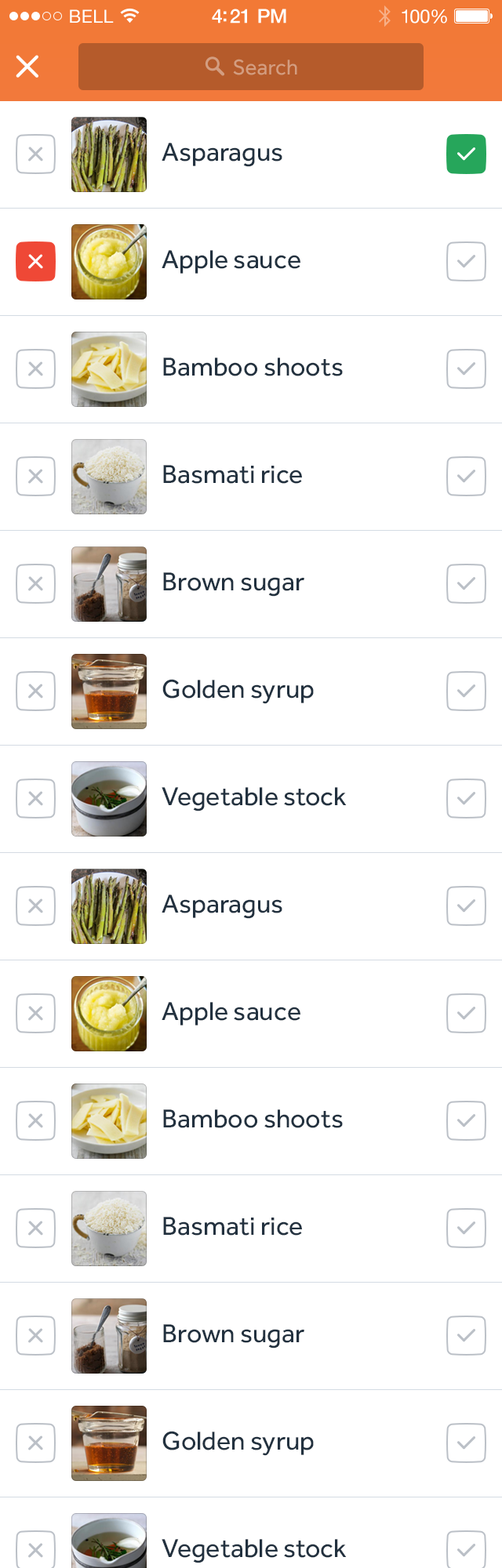
<style>
.page{position:relative;width:502px;height:1568px;background:#ffffff}
.page>*{position:absolute;margin:0}
.t1{font:18px "HelveticaNeue";letter-spacing:0.02em;color:#ffffff}
.t2{font:19.6px "HelveticaNeue-Medium";letter-spacing:-0.02em;color:#ffffff}
.t3{font:18.8px "HelveticaNeue";letter-spacing:-0.02em;color:#ffffff}
.t4{font:22px "Effra-Regular";color:#d19a7c}
.t5{font:26.7px "Effra-Regular";color:#22313f}
</style>
<div class="page">
<p class="t1" style="left:70px;top:9px;width:44px;height:14px">BELL</p>
<p class="t2" style="left:212px;top:9px;width:74px;height:15px">4:21 PM</p>
<p class="t3" style="left:401px;top:9px;width:46px;height:15px">100%</p>
<p class="t4" style="left:233px;top:59px;width:64px;height:16px">Search</p>
<p class="t5" style="left:162px;top:143px;width:120px;height:24px">Asparagus</p>
<p class="t5" style="left:162px;top:250px;width:138px;height:24px">Apple sauce</p>
<p class="t5" style="left:163px;top:358px;width:180px;height:18px">Bamboo shoots</p>
<p class="t5" style="left:163px;top:465px;width:139px;height:19px">Basmati rice</p>
<p class="t5" style="left:163px;top:572px;width:141px;height:25px">Brown sugar</p>
<p class="t5" style="left:162px;top:679px;width:152px;height:25px">Golden syrup</p>
<p class="t5" style="left:162px;top:787px;width:185px;height:24px">Vegetable stock</p>
<p class="t5" style="left:162px;top:895px;width:120px;height:24px">Asparagus</p>
<p class="t5" style="left:162px;top:1002px;width:138px;height:23px">Apple sauce</p>
<p class="t5" style="left:163px;top:1109px;width:180px;height:19px">Bamboo shoots</p>
<p class="t5" style="left:163px;top:1217px;width:139px;height:19px">Basmati rice</p>
<p class="t5" style="left:163px;top:1324px;width:141px;height:24px">Brown sugar</p>
<p class="t5" style="left:162px;top:1431px;width:152px;height:25px">Golden syrup</p>
<p class="t5" style="left:162px;top:1539px;width:185px;height:24px">Vegetable stock</p>
</div>
